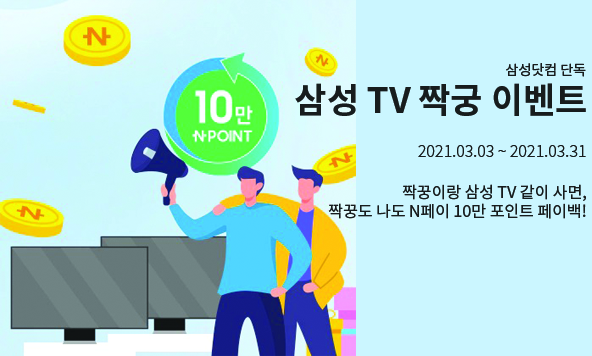
<style>
.page{position:relative;width:592px;height:356px;background:#cbf6ff}
.page>*{position:absolute;margin:0}
.t1{font:14px "NotoSansKR-Regular";color:#171c1d}
.t2{font:35px "NotoSansKR-Bold";color:#171c1d}
.t3{font:16px "NotoSansKR-Light";color:#171c1d}
.t4{font:16px "NotoSansKR-Regular";color:#171c1d}
</style>
<div class="page">
<p class="t1" style="left:506px;top:63px;width:80px;height:14px">삼성닷컴 단독</p>
<p class="t2" style="left:295px;top:83px;width:291px;height:33px">삼성 TV 짝궁 이벤트</p>
<p class="t3" style="left:418px;top:145px;width:168px;height:12px">2021.03.03 ~ 2021.03.31</p>
<p class="t4" style="left:328px;top:184px;width:258px;height:35px;text-align:right">짝꿍이랑 삼성 TV 같이 사면,<br>짝꿍도 나도 N페이 10만 포인트 페이백!</p>
</div>
